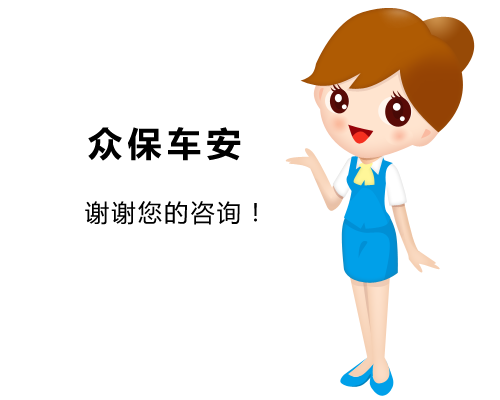
<style>
.page{position:relative;width:500px;height:400px;background:#ffffff}
.page>*{position:absolute;margin:0}
.t1{font:36px "FZLTCHK--GBK1-0";letter-spacing:0.1em;color:#000000}
.t2{font:24px "MicrosoftYaHei";letter-spacing:0.1em;color:#000000}
</style>
<div class="page">
<p class="t1" style="left:88px;top:127px;width:153px;height:34px">众保车安</p>
<p class="t2" style="left:85px;top:201px;width:172px;height:24px">谢谢您的咨询！</p>
</div>
